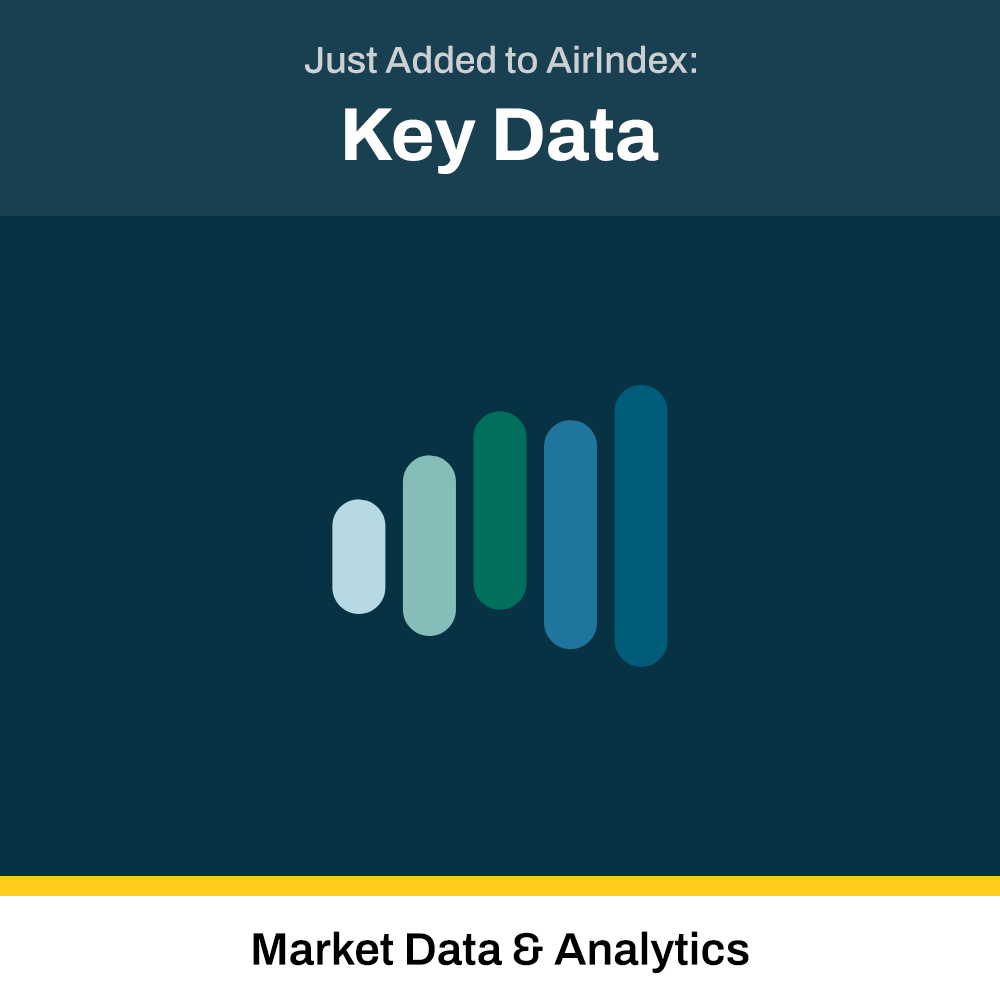
<style>
.page{position:relative;width:1000px;height:1000px;background:#063243}
.page>*{position:absolute;margin:0}
.t1{font:37.5px "ArchivoRoman-Medium";color:#cbd0d3}
.t2{font:75px "ArchivoRoman-Bold";color:#fefefe}
.t3{font:45.8px "Archivo-SemiBold";color:#000000}
</style>
<div class="page">
<p class="t1" style="left:305px;top:45px;width:391px;height:29px">Just Added to AirIndex:</p>
<p class="t2" style="left:345px;top:108px;width:314px;height:66px">Key Data</p>
<p class="t3" style="left:253px;top:931px;width:496px;height:42px">Market Data &amp; Analytics</p>
</div>
